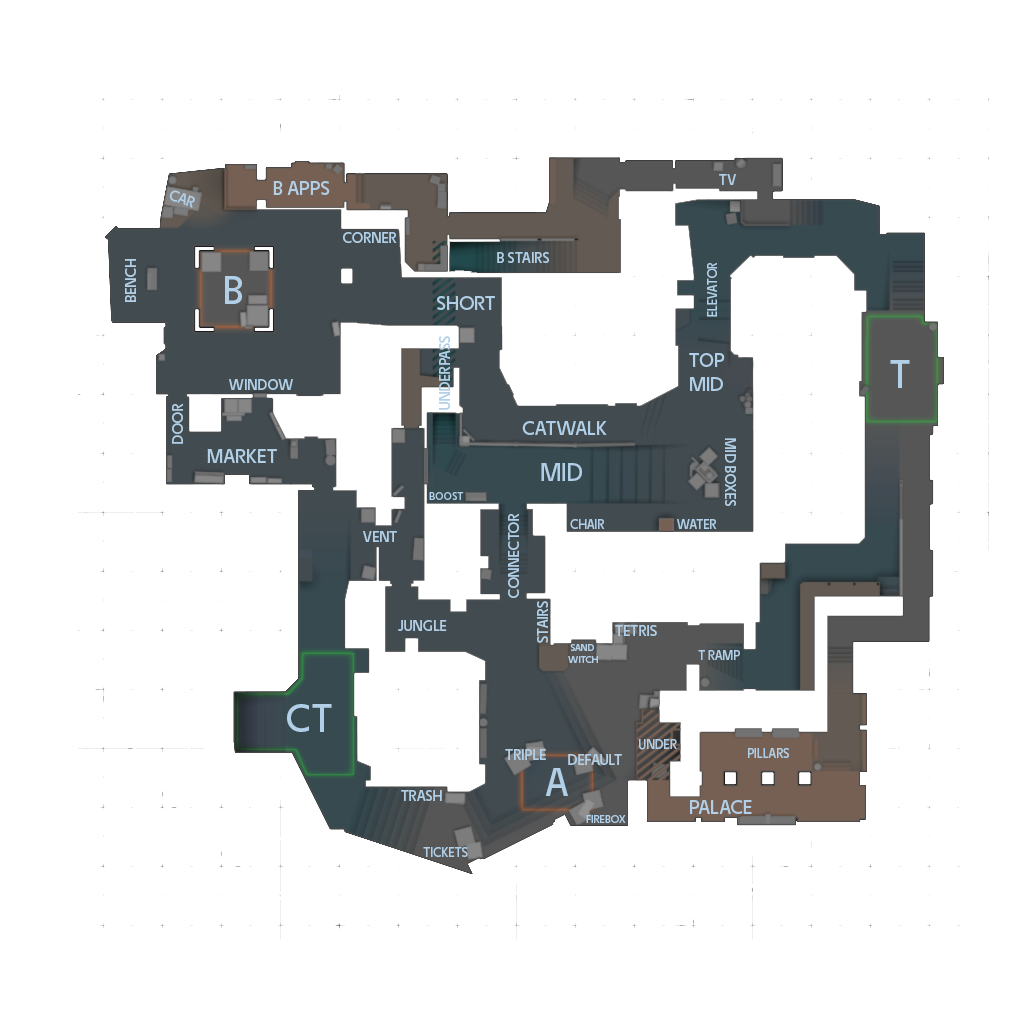
<style>
.page{position:relative;width:1024px;height:1024px;background:#ffffff}
.page>*{position:absolute;margin:0}
.t1{font:15px "TASAExplorer-Medium";color:#b1d0e7}
.t2{font:20px "TASAExplorer-Medium";color:#b1d0e7}
.t3{font:13px "TASAExplorer-Medium";color:#b1d0e7}
.t4{font:40px "TASAExplorer-Medium";color:#b1d0e7}
.t5{font:25px "TASAExplorer-Medium";color:#b1d0e7}
.t6{font:11px "TASAExplorer-Medium";color:#b1d0e7}
.t7{font:10px "TASAExplorer-Medium";color:#b1d0e7}
</style>
<div class="page">
<p class="t1" style="left:719px;top:174px;width:17px;height:11px">TV</p>
<p class="t2" style="left:273px;top:181px;width:57px;height:14px">B APPS</p>
<p class="t1" style="left:169px;top:190px;width:26px;height:18px;rotate:20deg">CAR</p>
<p class="t1" style="left:343px;top:232px;width:54px;height:11px">CORNER</p>
<p class="t1" style="left:497px;top:252px;width:52px;height:11px">B STAIRS</p>
<p class="t1" style="left:125px;top:259px;width:11px;height:43px;rotate:-90deg">BENCH</p>
<p class="t3" style="left:707px;top:262px;width:10px;height:55px;rotate:-90deg">ELEVATOR</p>
<p class="t4" style="left:225px;top:276px;width:17px;height:28px">B</p>
<p class="t2" style="left:437px;top:296px;width:58px;height:14px">SHORT</p>
<p class="t1" style="left:439px;top:336px;width:11px;height:74px;rotate:-90deg">UNDERPASS</p>
<p class="t2" style="left:689px;top:353px;width:36px;height:38px">TOP<br>MID</p>
<p class="t4" style="left:890px;top:360px;width:20px;height:28px">T</p>
<p class="t1" style="left:229px;top:379px;width:64px;height:11px">WINDOW</p>
<p class="t1" style="left:172px;top:403px;width:11px;height:41px;rotate:-90deg">DOOR</p>
<p class="t2" style="left:522px;top:421px;width:85px;height:14px">CATWALK</p>
<p class="t1" style="left:725px;top:438px;width:11px;height:68px;rotate:90deg">MID BOXES</p>
<p class="t2" style="left:207px;top:449px;width:70px;height:14px">MARKET</p>
<p class="t5" style="left:541px;top:463px;width:41px;height:18px">MID</p>
<p class="t6" style="left:429px;top:492px;width:35px;height:8px">BOOST</p>
<p class="t1" style="left:508px;top:513px;width:11px;height:85px;rotate:-90deg">CONNECTOR</p>
<p class="t3" style="left:570px;top:519px;width:35px;height:10px">CHAIR</p>
<p class="t3" style="left:677px;top:519px;width:40px;height:10px">WATER</p>
<p class="t1" style="left:363px;top:531px;width:34px;height:11px">VENT</p>
<p class="t1" style="left:537px;top:601px;width:11px;height:42px;rotate:-90deg">STAIRS</p>
<p class="t1" style="left:398px;top:620px;width:49px;height:11px">JUNGLE</p>
<p class="t1" style="left:615px;top:625px;width:42px;height:11px">TETRIS</p>
<p class="t7" style="left:568px;top:644px;width:30px;height:19px">SAND<br>WITCH</p>
<p class="t3" style="left:698px;top:650px;width:42px;height:10px">T RAMP</p>
<p class="t4" style="left:287px;top:704px;width:45px;height:28px">CT</p>
<p class="t1" style="left:505px;top:749px;width:41px;height:11px">TRIPLE</p>
<p class="t3" style="left:639px;top:739px;width:38px;height:11px">UNDER</p>
<p class="t3" style="left:748px;top:748px;width:41px;height:10px">PILLARS</p>
<p class="t1" style="left:568px;top:754px;width:54px;height:11px">DEFAULT</p>
<p class="t4" style="left:545px;top:768px;width:23px;height:28px">A</p>
<p class="t1" style="left:401px;top:790px;width:41px;height:11px">TRASH</p>
<p class="t2" style="left:690px;top:800px;width:62px;height:14px">PALACE</p>
<p class="t6" style="left:586px;top:815px;width:40px;height:8px">FIREBOX</p>
<p class="t3" style="left:423px;top:847px;width:45px;height:10px">TICKETS</p>
</div>
